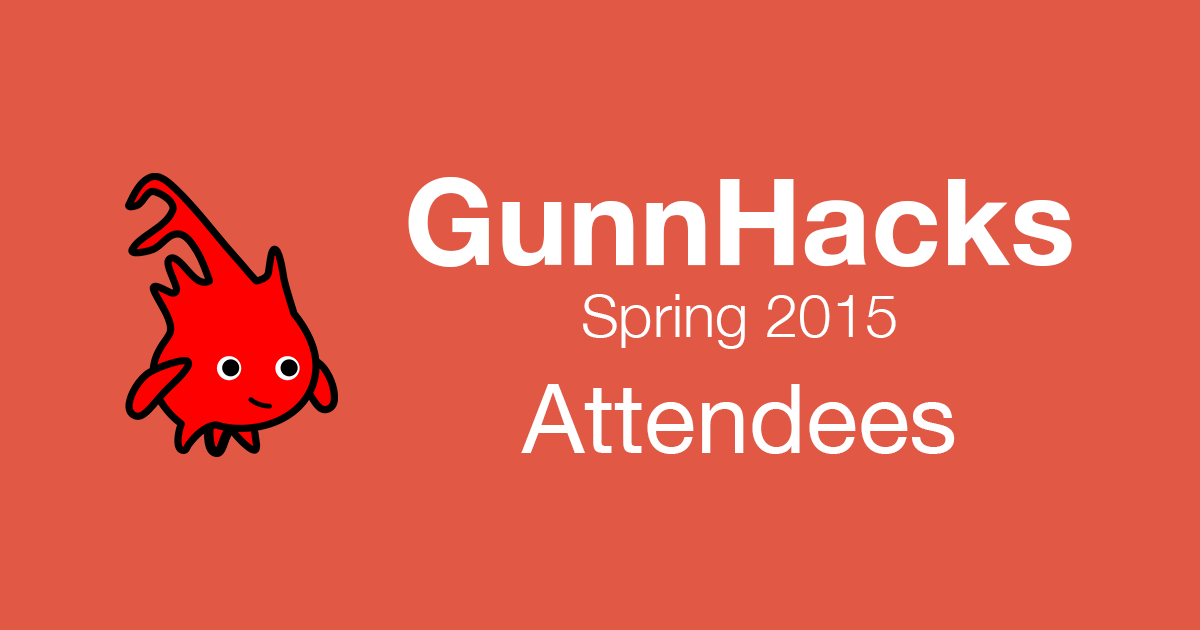
<style>
.page{position:relative;width:1200px;height:630px;background:#e15945}
.page>*{position:absolute;margin:0}
.t1{font:60px "HelveticaNeue-Light";color:#ffffff}
.t2{font:121px "HelveticaNeue-Bold";color:#ffffff}
.t3{font:96px "HelveticaNeue";color:#ffffff}
</style>
<div class="page">
<p class="t1" style="left:408px;top:177px;width:664px;height:277px;text-align:center"><span class="t2">GunnHacks<br></span>Spring 2015<br><span class="t3">Attendees</span></p>
</div>
